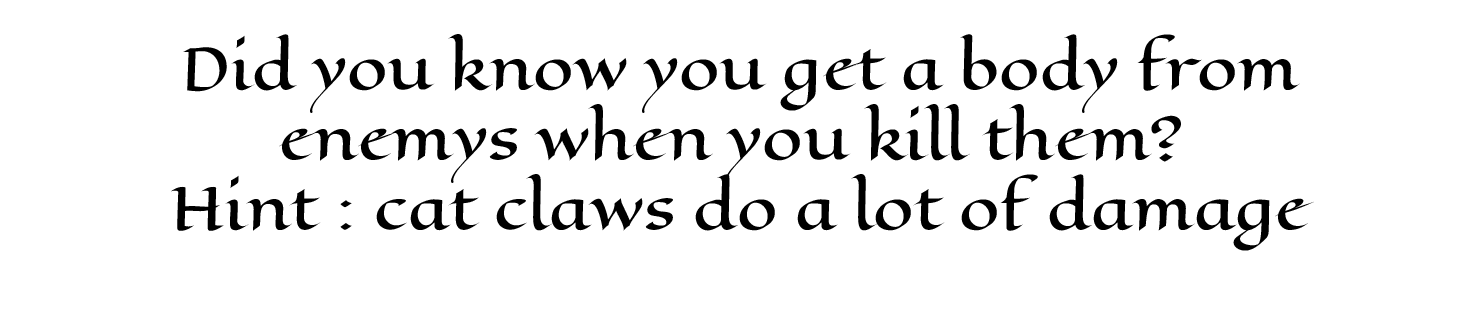
<style>
.page{position:relative;width:1474px;height:331px;background:#ffffff}
.page>*{position:absolute;margin:0}
.t1{font:58.3px "EagleLake-Regular";color:#000000}
</style>
<div class="page">
<p class="t1" style="left:171px;top:34px;width:1143px;height:217px;text-align:center">Did you know you get a body from<br>enemys when you kill them? <br>Hint : cat claws do a lot of damage</p>
</div>
